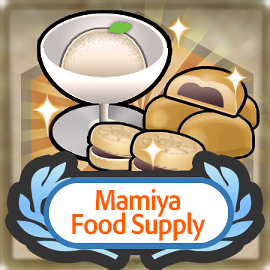
<style>
.page{position:relative;width:270px;height:270px}
.page>*{position:absolute;margin:0}
.t1{font:30px/24px "AdobeClean-Bold";letter-spacing:-0.04em;color:#ff5d00;scale:0.9 1}
</style>
<div class="page">
<p class="t1" style="left:72px;top:188px;width:133px;height:53px;text-align:center">Mamiya<br>Food Supply</p>
</div>
